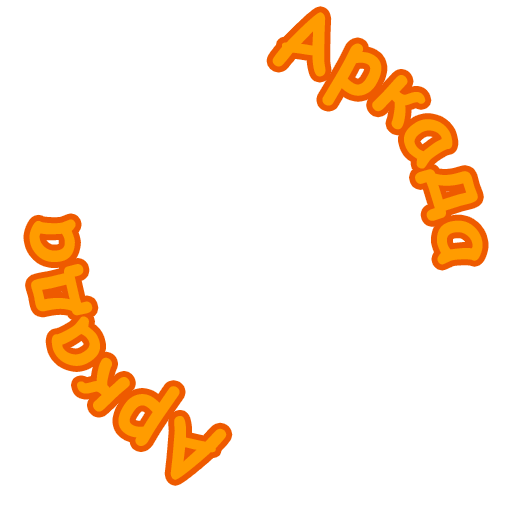
<style>
.page{position:relative;width:512px;height:512px;background:#ffffff}
.page>*{position:absolute;margin:0}
.t1{font:85px "ComicSansMS-Bold";color:#ff9c00}
</style>
<div class="page">
<p class="t1" style="left:29px;top:12px;width:454px;height:468px">Аркада        Аркада</p>
</div>
